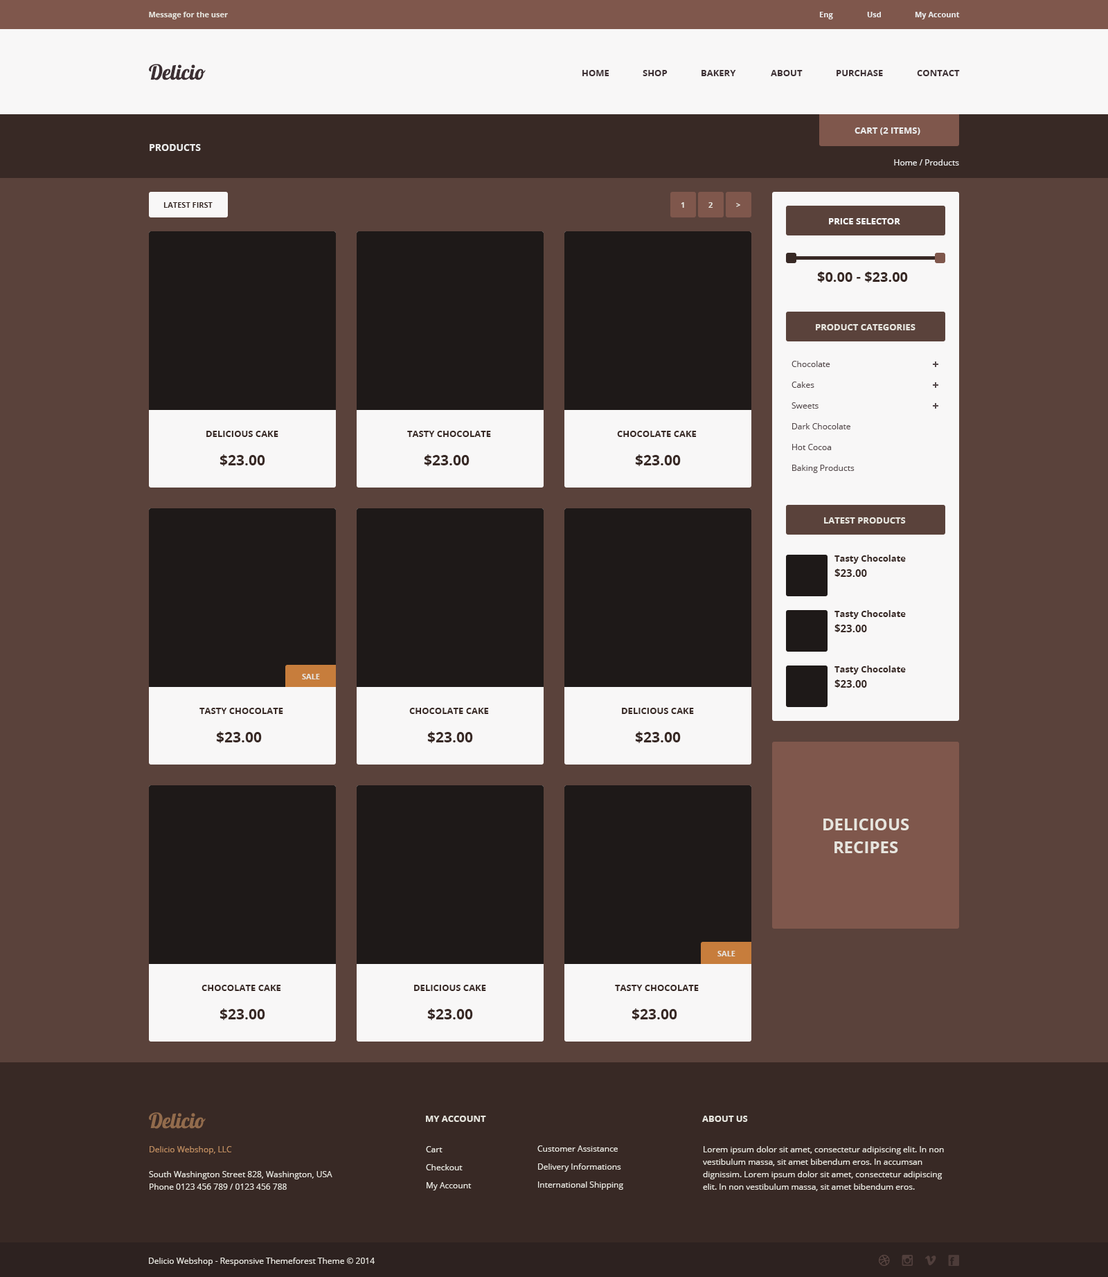
<style>
.page{position:relative;width:1108px;height:1277px;background:#5a423b}
.page>*{position:absolute;margin:0}
.t1{font:7.6px "OpenSans-Bold";color:#e7e5de}
.t2{font:7.6px "OpenSans-Bold";color:#ebebeb}
.t3{font:20.8px "Lobster1.4";color:#3c2f33}
.t4{font:9px "OpenSans-Bold";color:#3c2f33}
.t5{font:9px "OpenSans-Bold";color:#ebebeb}
.t6{font:9.7px "OpenSans-Bold";color:#ebebeb}
.t7{font:8.3px "OpenSans";color:#ebebeb}
.t8{font:7.6px "OpenSans-Bold";color:#382925}
.t9{font:9px "OpenSans-Bold";color:#f6f6f6}
.t10{font:13.8px "OpenSans-Bold";color:#382925}
.t11{font:9px "OpenSans-Bold";color:#e7e5de}
.t12{font:8.3px/20.8px "OpenSans";color:#554a4c}
.t13{font:9px "OpenSans-Bold";color:#382925}
.t14{font:14.5px "OpenSans-Bold";color:#382925}
.t15{font:10.4px "OpenSans-Bold";color:#382925}
.t16{font:16.6px/22.8px "OpenSans-Bold";color:#e7e5de}
.t17{font:20.8px "Lobster1.4";color:#926b4c}
.t18{font:8.3px/12.5px "OpenSans";color:#e7e5de}
.t19{font:8.3px/12.5px "OpenSans";color:#be8c60}
.t20{font:8.3px/18px "OpenSans";color:#e7e5de}
.t21{font:8.3px "OpenSans";color:#e7e5de}
</style>
<div class="page">
<p class="t1" style="left:149px;top:12px;width:79px;height:7px">Message for the user</p>
<p class="t2" style="left:819px;top:12px;width:14px;height:7px">Eng</p>
<p class="t2" style="left:867px;top:12px;width:14px;height:5px">Usd</p>
<p class="t2" style="left:915px;top:12px;width:45px;height:7px">My Account</p>
<p class="t3" style="left:149px;top:64px;width:57px;height:16px">Delicio</p>
<p class="t4" style="left:582px;top:70px;width:27px;height:6px">HOME</p>
<p class="t4" style="left:642px;top:70px;width:25px;height:6px">SHOP</p>
<p class="t4" style="left:701px;top:70px;width:35px;height:6px">BAKERY</p>
<p class="t4" style="left:771px;top:70px;width:31px;height:6px">ABOUT</p>
<p class="t4" style="left:836px;top:70px;width:47px;height:6px">PURCHASE</p>
<p class="t4" style="left:917px;top:70px;width:43px;height:6px">CONTACT</p>
<p class="t5" style="left:854px;top:127px;width:66px;height:8px">CART (2 ITEMS)</p>
<p class="t6" style="left:150px;top:144px;width:51px;height:7px">PRODUCTS</p>
<p class="t7" style="left:894px;top:159px;width:65px;height:6px">Home / Products</p>
<p class="t8" style="left:163px;top:202px;width:50px;height:6px">LATEST FIRST</p>
<p class="t1" style="left:681px;top:202px;width:3px;height:6px">1</p>
<p class="t1" style="left:708px;top:202px;width:5px;height:6px">2</p>
<p class="t1" style="left:736px;top:203px;width:4px;height:4px">&gt;</p>
<p class="t9" style="left:829px;top:218px;width:71px;height:6px">PRICE SELECTOR</p>
<p class="t10" style="left:817px;top:271px;width:91px;height:11px">$0.00 - $23.00</p>
<p class="t11" style="left:816px;top:324px;width:99px;height:6px">PRODUCT CATEGORIES</p>
<p class="t12" style="left:791px;top:361px;width:63px;height:112px">Chocolate<br>Cakes<br>Sweets<br>Dark Chocolate<br>Hot Cocoa<br>Baking Products</p>
<p class="t13" style="left:206px;top:431px;width:72px;height:6px">DELICIOUS CAKE</p>
<p class="t13" style="left:407px;top:431px;width:84px;height:6px">TASTY CHOCOLATE</p>
<p class="t13" style="left:617px;top:431px;width:79px;height:6px">CHOCOLATE CAKE</p>
<p class="t14" style="left:219px;top:454px;width:46px;height:12px">$23.00</p>
<p class="t14" style="left:424px;top:454px;width:45px;height:12px">$23.00</p>
<p class="t14" style="left:635px;top:454px;width:46px;height:12px">$23.00</p>
<p class="t11" style="left:824px;top:517px;width:82px;height:6px">LATEST PRODUCTS</p>
<p class="t13" style="left:834px;top:555px;width:72px;height:9px">Tasty Chocolate</p>
<p class="t15" style="left:834px;top:568px;width:33px;height:9px">$23.00</p>
<p class="t13" style="left:834px;top:610px;width:72px;height:9px">Tasty Chocolate</p>
<p class="t15" style="left:834px;top:624px;width:33px;height:8px">$23.00</p>
<p class="t13" style="left:834px;top:665px;width:72px;height:9px">Tasty Chocolate</p>
<p class="t1" style="left:302px;top:674px;width:18px;height:5px">SALE</p>
<p class="t15" style="left:834px;top:679px;width:33px;height:8px">$23.00</p>
<p class="t13" style="left:199px;top:708px;width:84px;height:6px">TASTY CHOCOLATE</p>
<p class="t13" style="left:409px;top:708px;width:80px;height:6px">CHOCOLATE CAKE</p>
<p class="t13" style="left:622px;top:708px;width:72px;height:6px">DELICIOUS CAKE</p>
<p class="t14" style="left:216px;top:731px;width:46px;height:12px">$23.00</p>
<p class="t14" style="left:427px;top:731px;width:46px;height:12px">$23.00</p>
<p class="t14" style="left:635px;top:731px;width:46px;height:12px">$23.00</p>
<p class="t16" style="left:823px;top:818px;width:86px;height:35px;text-align:center">DELICIOUS<br>RECIPES</p>
<p class="t1" style="left:717px;top:951px;width:18px;height:5px">SALE</p>
<p class="t13" style="left:201px;top:984px;width:80px;height:7px">CHOCOLATE CAKE</p>
<p class="t13" style="left:414px;top:984px;width:72px;height:7px">DELICIOUS CAKE</p>
<p class="t13" style="left:615px;top:984px;width:84px;height:7px">TASTY CHOCOLATE</p>
<p class="t14" style="left:219px;top:1008px;width:46px;height:12px">$23.00</p>
<p class="t14" style="left:427px;top:1008px;width:46px;height:12px">$23.00</p>
<p class="t14" style="left:631px;top:1008px;width:46px;height:12px">$23.00</p>
<p class="t17" style="left:149px;top:1112px;width:57px;height:16px">Delicio</p>
<p class="t11" style="left:426px;top:1115px;width:60px;height:7px">MY ACCOUNT</p>
<p class="t11" style="left:702px;top:1115px;width:46px;height:7px">ABOUT US</p>
<p class="t18" style="left:149px;top:1146px;width:183px;height:43px"><span class="t19">Delicio Webshop, LLC<br><br></span>South Washington Street 828, Washington, USA <br>Phone 0123 456 789 / 0123 456 788</p>
<p class="t20" style="left:426px;top:1146px;width:45px;height:44px">Cart         <br>Checkout<br>My Account</p>
<p class="t20" style="left:537px;top:1145px;width:86px;height:44px">Customer Assistance<br>Delivery Informations<br>International Shipping</p>
<p class="t18" style="left:703px;top:1146px;width:241px;height:45px">Lorem ipsum dolor sit amet, consectetur adipiscing elit. In non vestibulum massa, sit amet bibendum eros. In accumsan dignissim. Lorem ipsum dolor sit amet, consectetur adipiscing elit. In non vestibulum massa, sit amet bibendum eros.</p>
<p class="t21" style="left:149px;top:1257px;width:226px;height:9px">Delicio Webshop - Responsive Themeforest Theme © 2014</p>
</div>
